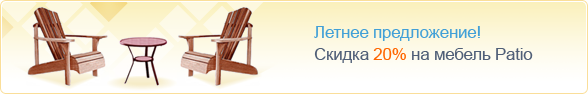
<style>
.page{position:relative;width:588px;height:94px}
.page>*{position:absolute;margin:0}
.t1{font:17px/22px "ArialMT";letter-spacing:-0.015em;color:#42a0d7}
.t2{font:17px/22px "ArialMT";letter-spacing:-0.015em;color:#505f77}
.t3{font:17px/22px "ArialMT";letter-spacing:-0.015em;color:#ff6600}
</style>
<div class="page">
<p class="t1" style="left:314px;top:26px;width:219px;height:37px">Летнее предложение!<br><span class="t2">Скидка </span><span class="t3">20% </span><span class="t2">на мебель Patio</span></p>
</div>
